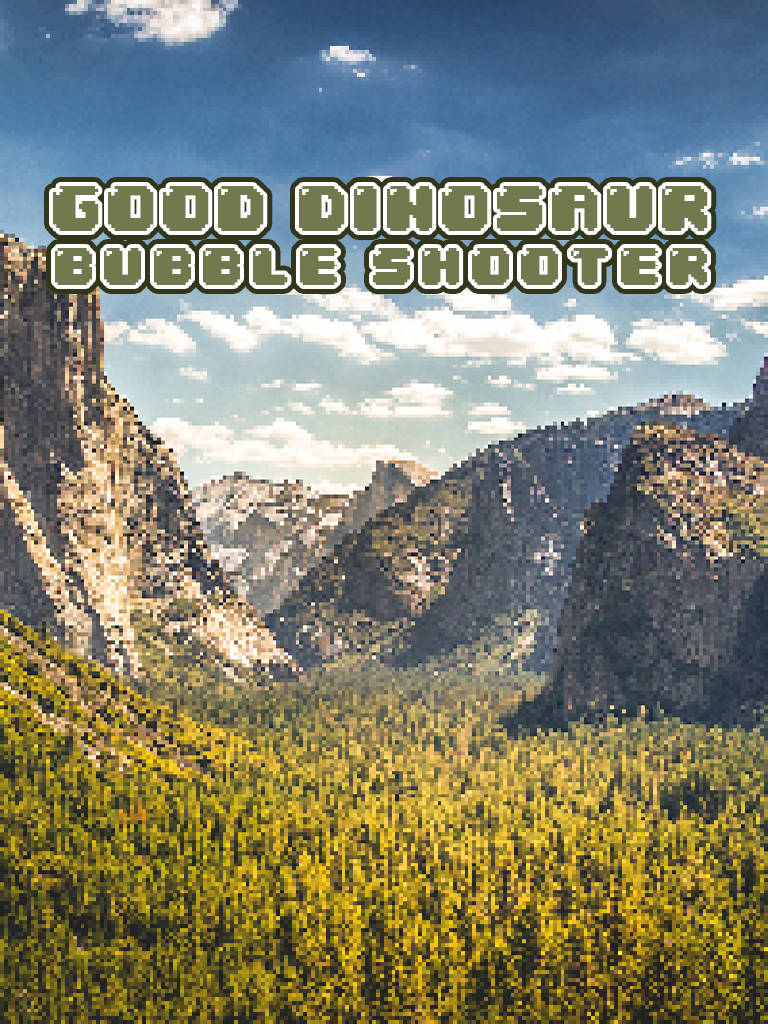
<style>
.page{position:relative;width:768px;height:1024px}
.page>*{position:absolute;margin:0}
.t1{font:45px "04b30";letter-spacing:0.16em;color:#72794f}
.t2{font:55px "04b30";letter-spacing:0.06em;color:#72794f}
</style>
<div class="page">
<p class="t1" style="left:53px;top:186px;width:655px;height:99px;text-align:center"><span class="t2">GOOD DINOSAUR<br></span>BUBBLE SHOOTER</p>
<p class="t1" style="left:53px;top:186px;width:655px;height:99px;text-align:center"><span class="t2">GOOD DINOSAUR<br></span>BUBBLE SHOOTER</p>
</div>
